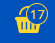
<style>
.page{position:relative;width:55px;height:43px;background:#0051ba}
.page>*{position:absolute;margin:0}
.t1{font:13px "OpenSans";color:#ffd633}
</style>
<div class="page">
<p class="t1" style="left:31px;top:10px;width:14px;height:9px">17</p>
</div>
